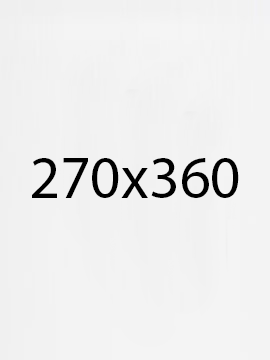
<style>
.page{position:relative;width:270px;height:360px;background:#f3f3f3}
.page>*{position:absolute;margin:0}
.t1{font:60px "MyriadPro-Regular";color:#000000}
</style>
<div class="page">
<p class="t1" style="left:32px;top:158px;width:207px;height:40px">270x360</p>
</div>
